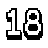
<style>
.page{position:relative;width:48px;height:48px;background:#ffffff}
.page>*{position:absolute;margin:0}
.t1{font:36px "KarmaFuture-Regular";color:#010101}
</style>
<div class="page">
<p class="t1" style="left:6px;top:8px;width:37px;height:32px">18</p>
</div>
